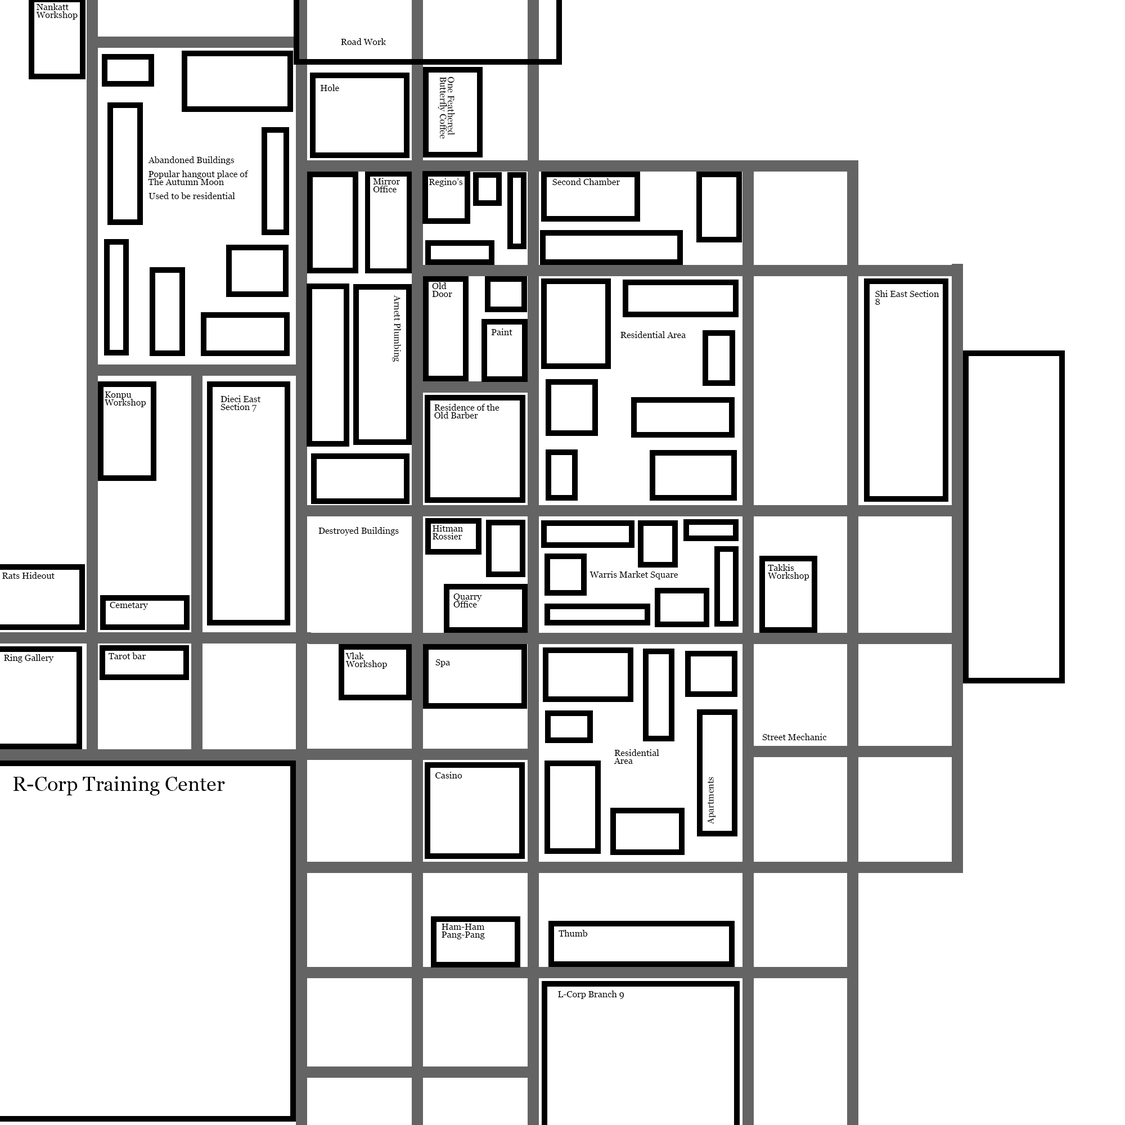
<style>
.page{position:relative;width:1125px;height:1125px;background:#ffffff}
.page>*{position:absolute;margin:0}
.t1{font:9px/7.9px "Georgia";color:#000000}
.t2{font:9px "Georgia";color:#000000}
.t3{font:20.2px "Georgia";color:#000000}
</style>
<div class="page">
<p class="t1" style="left:36px;top:3px;width:42px;height:17px">Nankatt<br>Workshop</p>
<p class="t2" style="left:341px;top:38px;width:45px;height:7px">Road Work</p>
<p class="t1" style="left:438px;top:76px;width:17px;height:63px;rotate:90deg">One Feathered<br>Butterfly Coffee</p>
<p class="t2" style="left:320px;top:84px;width:19px;height:7px">Hole</p>
<p class="t2" style="left:148px;top:156px;width:87px;height:9px">Abandoned Buildings</p>
<p class="t1" style="left:148px;top:170px;width:101px;height:15px">Popular hangout place of<br>The Autumn Moon</p>
<p class="t1" style="left:373px;top:178px;width:27px;height:14px">Mirror <br>Office</p>
<p class="t2" style="left:429px;top:178px;width:34px;height:9px">Regino’s</p>
<p class="t2" style="left:552px;top:178px;width:68px;height:7px">Second Chamber</p>
<p class="t2" style="left:148px;top:192px;width:87px;height:7px">Used to be residential</p>
<p class="t1" style="left:432px;top:282px;width:20px;height:15px">Old<br>Door</p>
<p class="t1" style="left:875px;top:290px;width:64px;height:15px">Shi East Section<br>8</p>
<p class="t2" style="left:392px;top:295px;width:9px;height:67px;rotate:90deg">Arnett Plumbing</p>
<p class="t2" style="left:491px;top:328px;width:21px;height:7px">Paint</p>
<p class="t2" style="left:620px;top:331px;width:66px;height:7px">Residential Area</p>
<p class="t1" style="left:105px;top:392px;width:41px;height:15px">Konpu<br>Workshop</p>
<p class="t1" style="left:220px;top:395px;width:41px;height:17px">Dieci East<br>Section 7</p>
<p class="t1" style="left:434px;top:404px;width:66px;height:14px">Residence of the<br>Old Barber</p>
<p class="t2" style="left:318px;top:527px;width:81px;height:9px">Destroyed Buildings</p>
<p class="t1" style="left:433px;top:525px;width:30px;height:14px">Hitman<br>Rossier</p>
<p class="t1" style="left:768px;top:564px;width:41px;height:16px">Takkis<br>Workshop</p>
<p class="t2" style="left:2px;top:572px;width:53px;height:7px">Rats Hideout</p>
<p class="t2" style="left:590px;top:571px;width:88px;height:8px">Warris Market Square</p>
<p class="t1" style="left:453px;top:593px;width:29px;height:15px">Quarry<br>Office</p>
<p class="t2" style="left:110px;top:602px;width:38px;height:8px">Cemetary</p>
<p class="t2" style="left:109px;top:652px;width:37px;height:7px">Tarot bar</p>
<p class="t1" style="left:345px;top:652px;width:42px;height:17px">Vlak <br>Workshop</p>
<p class="t2" style="left:4px;top:654px;width:50px;height:9px">Ring Gallery</p>
<p class="t2" style="left:435px;top:659px;width:15px;height:8px">Spa</p>
<p class="t2" style="left:762px;top:734px;width:65px;height:6px">Street Mechanic</p>
<p class="t1" style="left:614px;top:749px;width:45px;height:15px">Residential<br>Area</p>
<p class="t2" style="left:435px;top:772px;width:27px;height:6px">Casino</p>
<p class="t3" style="left:13px;top:776px;width:212px;height:19px">R-Corp Training Center</p>
<p class="t2" style="left:707px;top:777px;width:9px;height:48px;rotate:-90deg">Apartments</p>
<p class="t1" style="left:442px;top:924px;width:43px;height:15px">Ham-Ham<br>Pang-Pang</p>
<p class="t2" style="left:559px;top:930px;width:29px;height:7px">Thumb</p>
<p class="t2" style="left:558px;top:991px;width:66px;height:8px">L-Corp Branch 9</p>
</div>
